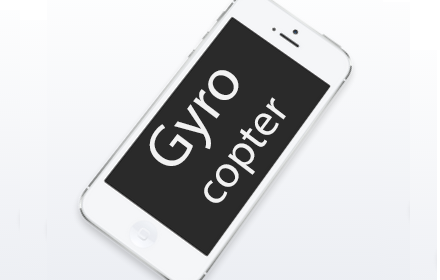
<style>
.page{position:relative;width:440px;height:280px}
.page>*{position:absolute;margin:0}
.t1{font:45px "MyriadPro-Regular";color:#f2f2f2}
.t2{font:60px "MyriadPro-Regular";color:#f2f2f2}
</style>
<div class="page">
<p class="t1" style="left:149px;top:70px;width:137px;height:133px;rotate:-53deg"><span class="t2">Gyro<br></span>copter</p>
</div>
